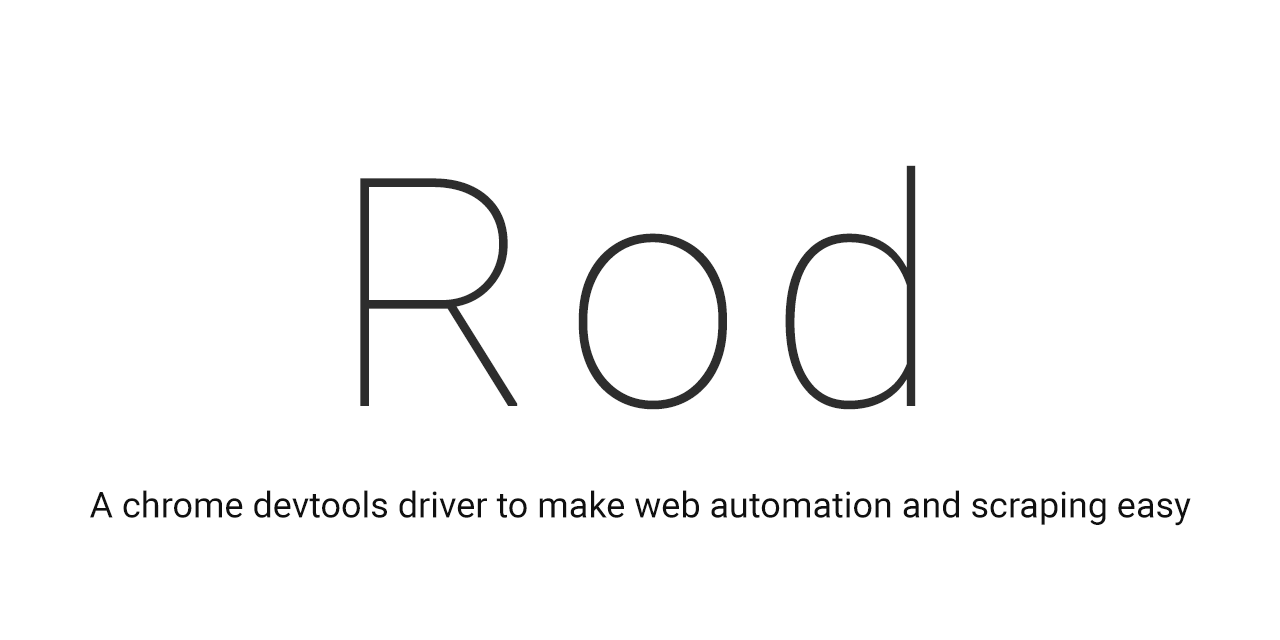
<style>
.page{position:relative;width:1280px;height:640px;background:#ffffff}
.page>*{position:absolute;margin:0}
.t1{font:320px "Roboto-Thin";letter-spacing:0.08em;color:#2d2d2d}
.t2{font:36px "Roboto-Regular";color:#101010}
</style>
<div class="page">
<p class="t1" style="left:360px;top:165px;width:556px;height:245px">Rod</p>
<p class="t2" style="left:90px;top:490px;width:1101px;height:36px">A chrome devtools driver to make web automation and scraping easy</p>
</div>
